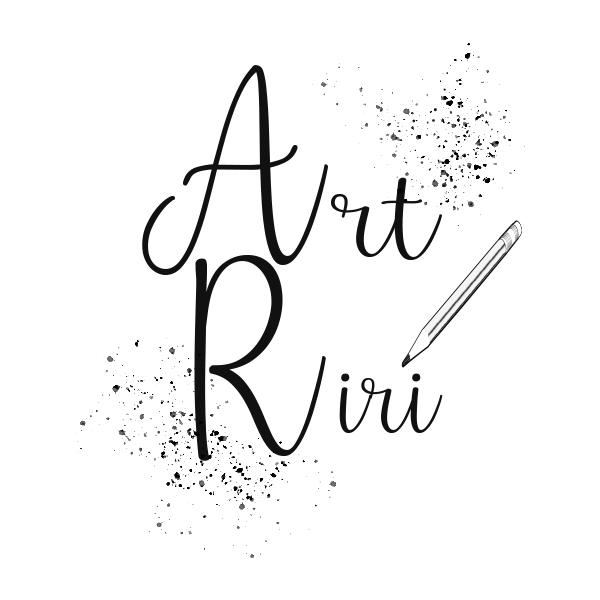
<style>
.page{position:relative;width:600px;height:600px;background:#ffffff}
.page>*{position:absolute;margin:0}
.t1{font:250.2px "BabyNames-Regular";color:#111111}
.t2{font:133.6px "BabyNames-Regular";color:#111111;scale:1.32 1}
.t3{font:117.5px "BabyNames-Regular";color:#111111;scale:1.18 1}
</style>
<div class="page">
<p class="t1" style="left:142px;top:65px;width:186px;height:210px">A</p>
<p class="t2" style="left:331px;top:177px;width:111px;height:83px">rt</p>
<p class="t1" style="left:194px;top:255px;width:132px;height:206px">R</p>
<p class="t3" style="left:339px;top:373px;width:104px;height:60px">iri</p>
</div>
